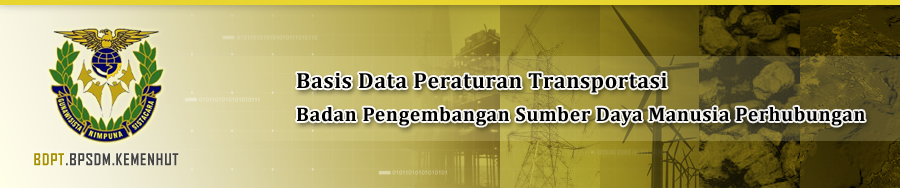
<style>
.page{position:relative;width:900px;height:188px}
.page>*{position:absolute;margin:0}
.t1{font:20px/33px "Cambria-Bold";letter-spacing:0.03em;color:#000000}
.t2{font:22px/33px "Cambria-Bold";letter-spacing:0.03em;color:#000000}
.t3{font:15.6px "AgencyFB-Bold";letter-spacing:0.065em;color:#434343;text-transform:uppercase}
.t4{font:15.6px "AgencyFB-Bold";letter-spacing:0.065em;color:#a79100;text-transform:uppercase}
</style>
<div class="page">
<p class="t1" style="left:297px;top:73px;width:568px;height:53px"><span class="t2">Basis Data Peraturan Transportasi<br></span>Badan Pengembangan Sumber Daya Manusia Perhubungan</p>
<p class="t3" style="left:34px;top:153px;width:145px;height:13px"><span class="t4">BDPT</span>.BPSDM.KEMENHUT</p>
</div>
